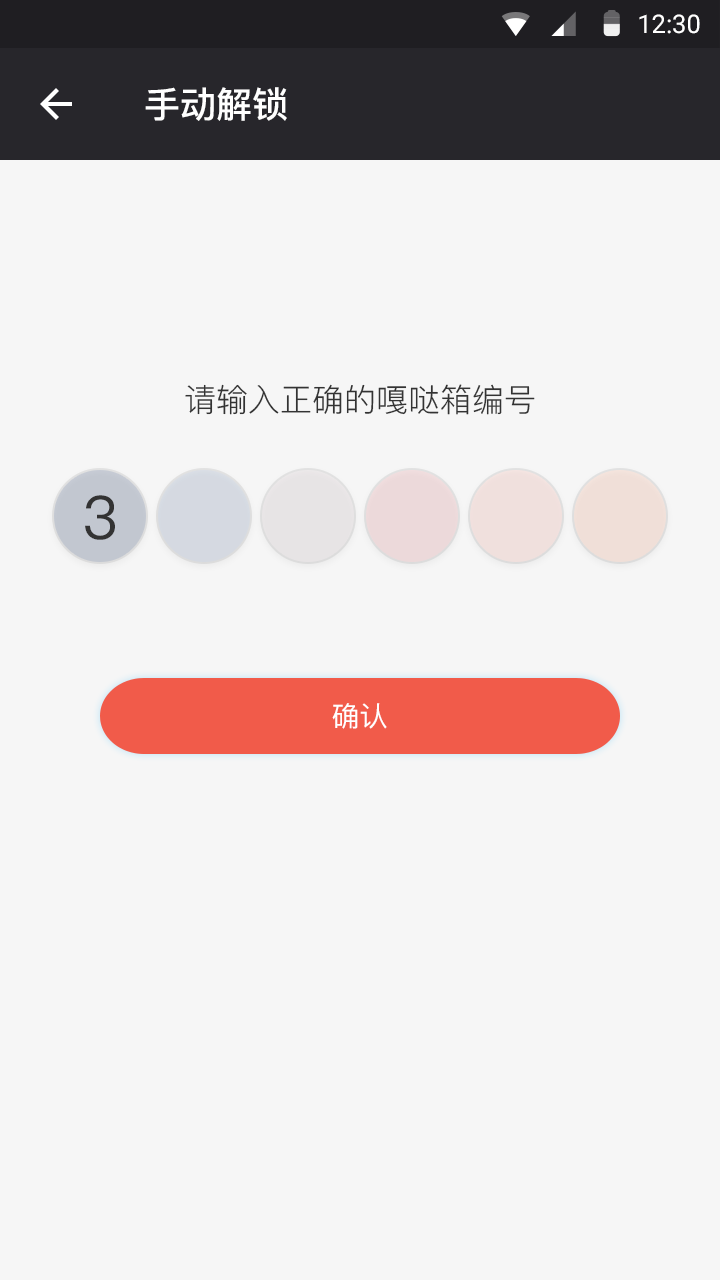
<style>
.page{position:relative;width:720px;height:1280px;background:#f6f6f6}
.page>*{position:absolute;margin:0}
.t1{font:25.4px "Roboto-Regular";color:#ffffff}
.t2{font:36px "PingFang-SC-Bold";color:#ffffff}
.t3{font:32px "PingFang-SC-Regular";color:#333333}
.t4{font:60px "PingFang-SC-Medium";color:#333333}
.t5{font:28px "PingFang-SC-Medium";color:#ffffff}
</style>
<div class="page">
<p class="t1" style="left:639px;top:14px;width:61px;height:20px">12:30</p>
<p class="t2" style="left:145px;top:87px;width:142px;height:34px">手动解锁</p>
<p class="t3" style="left:185px;top:384px;width:350px;height:31px">请输入正确的嘎哒箱编号</p>
<p class="t4" style="left:85px;top:495px;width:30px;height:45px">3</p>
<p class="t5" style="left:332px;top:703px;width:55px;height:26px">确认</p>
</div>
